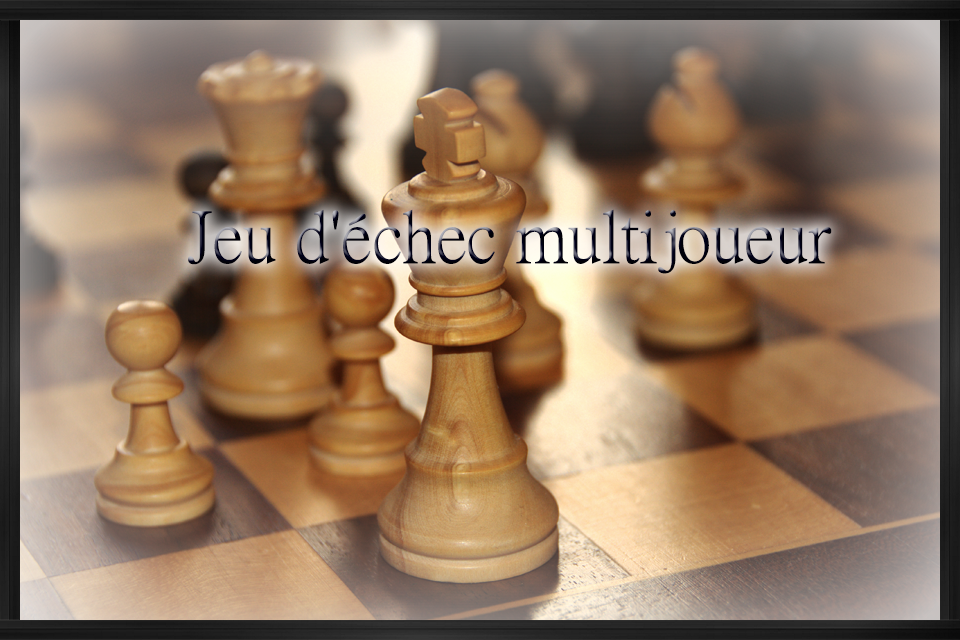
<style>
.page{position:relative;width:960px;height:640px}
.page>*{position:absolute;margin:0}
.t1{font:72px "PMingLiU-ExtB";color:#000019}
</style>
<div class="page">
<p class="t1" style="left:188px;top:209px;width:644px;height:65px">Jeu d'échec multijoueur</p>
</div>
